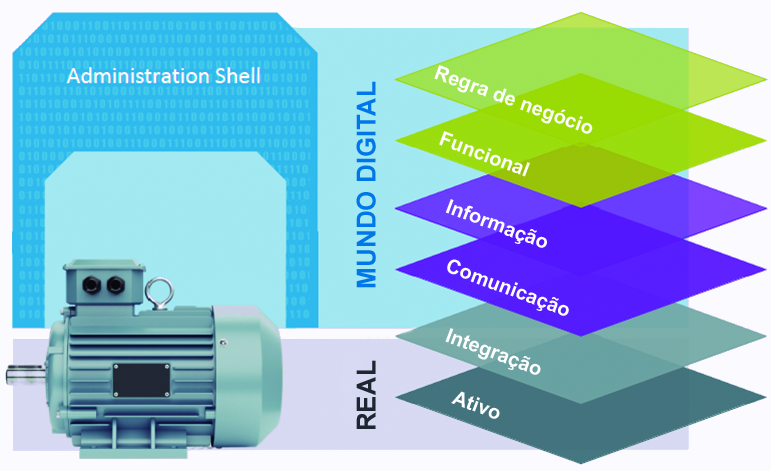
<style>
.page{position:relative;width:771px;height:471px}
.page>*{position:absolute;margin:0}
.t1{font:20px "Arial-BoldMT";color:#ffffff}
.t2{font:26px "Arial-BoldMT";color:#0076e9}
.t3{font:26px "Arial-BoldMT";color:#1e2631}
</style>
<div class="page">
<p class="t1" style="left:434px;top:65px;width:159px;height:69px;rotate:20deg">Regra de negócio</p>
<p class="t2" style="left:356px;top:81px;width:20px;height:207px;rotate:-90deg">MUNDO DIGITAL</p>
<p class="t1" style="left:439px;top:131px;width:91px;height:46px;rotate:21deg">Funcional</p>
<p class="t1" style="left:445px;top:199px;width:102px;height:49px;rotate:21deg">Informação</p>
<p class="t1" style="left:447px;top:259px;width:122px;height:57px;rotate:21deg">Comunicação</p>
<p class="t1" style="left:445px;top:328px;width:96px;height:47px;rotate:21deg">Integração</p>
<p class="t3" style="left:356px;top:360px;width:20px;height:69px;rotate:-90deg">REAL</p>
<p class="t1" style="left:451px;top:391px;width:49px;height:28px;rotate:21deg">Ativo</p>
</div>
